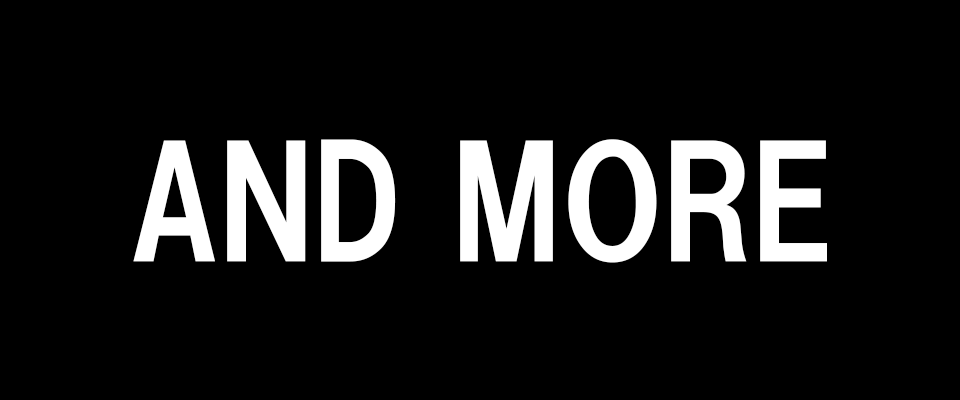
<style>
.page{position:relative;width:960px;height:400px;background:#000000}
.page>*{position:absolute;margin:0}
.t1{font:150px "HGSSoeiKakugothicUB";color:#ffffff}
</style>
<div class="page">
<p class="t1" style="left:133px;top:139px;width:694px;height:124px">AND MORE</p>
</div>
